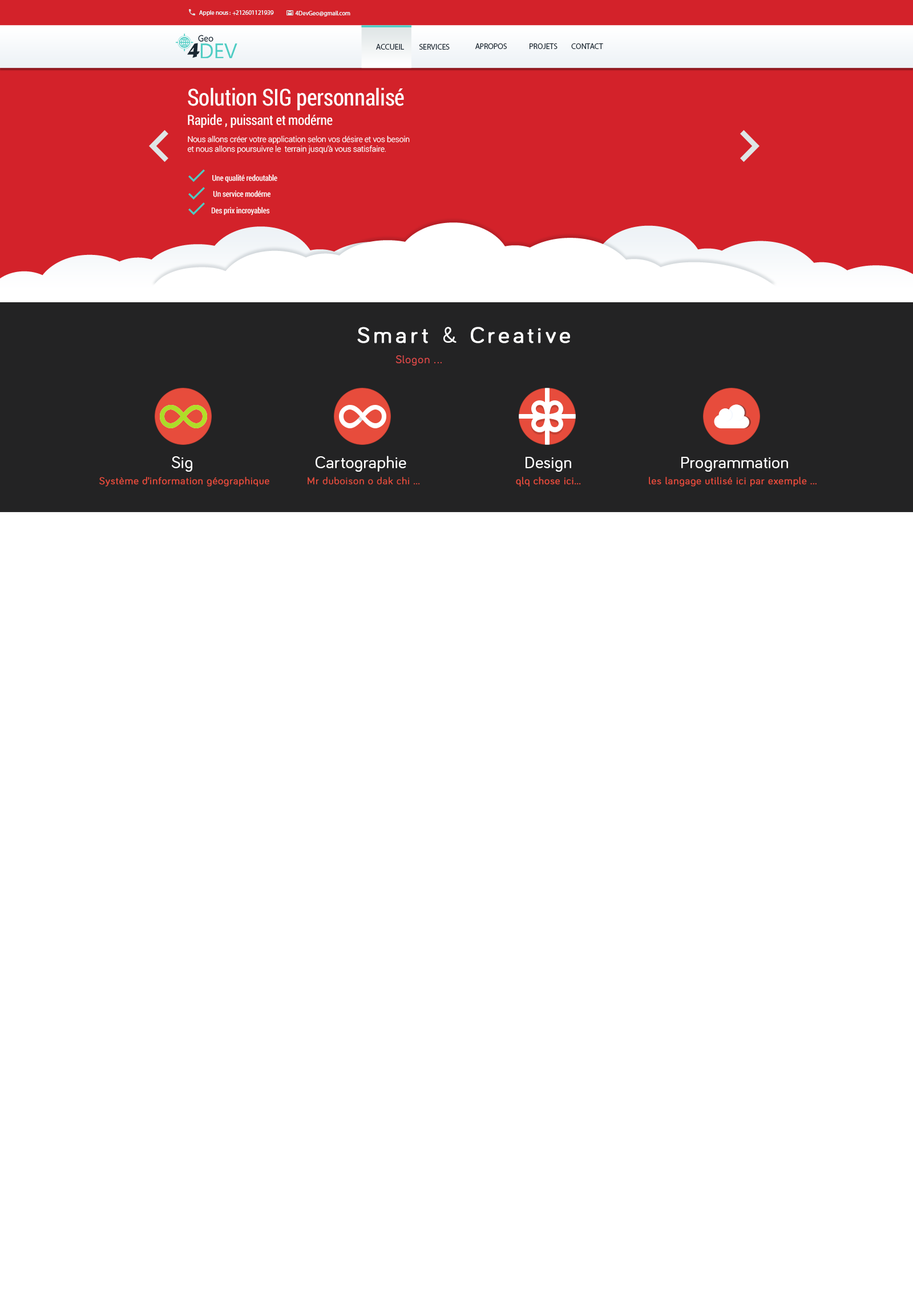
<style>
.page{position:relative;width:913px;height:1306px;background:#ffffff}
.page>*{position:absolute;margin:0}
.t1{font:6.3px "MyriadPro-Regular";letter-spacing:-0.01em;color:#edf2f6}
.t2{font:8px "MyriadPro-Regular";letter-spacing:-0.01em;color:#1a2732}
.t3{font:23.3px "RobotoCondensed-Regular";letter-spacing:-0.01em;color:#ffffff}
.t4{font:13.8px "RobotoCondensed-Regular";letter-spacing:-0.01em;color:#ffffff}
.t5{font:8px "Roboto-Light";letter-spacing:-0.01em;color:#ffffff}
.t6{font:8px "RobotoCondensed-Regular";letter-spacing:-0.01em;color:#ffffff}
.t7{font:22.8px "Bariol-Regular";letter-spacing:0.16em;color:#ffffff;font-weight:bold}
.t8{font:22.8px "Bariol-Regular";letter-spacing:0.16em;color:#ffffff}
.t9{font:11.4px "Bariol-Regular";letter-spacing:0.06em;color:#d94948}
.t10{font:17.1px "Bariol-Regular";letter-spacing:0.03em;color:#ffffff}
.t11{font:10.3px "Bariol-Regular";letter-spacing:0.04em;color:#e74c3c;font-weight:bold}
</style>
<div class="page">
<p class="t1" style="left:199px;top:10px;width:75px;height:6px">Apple nous : +212601121939</p>
<p class="t1" style="left:295px;top:11px;width:55px;height:6px">4DevGeo@gmail.com</p>
<p class="t2" style="left:376px;top:44px;width:28px;height:6px">ACCUEIL</p>
<p class="t2" style="left:419px;top:44px;width:31px;height:6px">SERVICES</p>
<p class="t2" style="left:475px;top:43px;width:32px;height:6px">APROPOS</p>
<p class="t2" style="left:529px;top:43px;width:28px;height:6px">PROJETS</p>
<p class="t2" style="left:571px;top:43px;width:32px;height:6px">CONTACT</p>
<p class="t3" style="left:188px;top:88px;width:216px;height:23px">Solution SIG personnalisé</p>
<p class="t4" style="left:188px;top:114px;width:145px;height:14px">Rapide , puissant et modérne</p>
<p class="t5" style="left:188px;top:136px;width:222px;height:18px">Nous allons créer votre application selon vos désire et vos besoin<br>et nous allons poursuivre le  terrain jusqu’à vous satisfaire.</p>
<p class="t6" style="left:212px;top:175px;width:65px;height:8px">Une qualité redoutable</p>
<p class="t6" style="left:213px;top:191px;width:58px;height:6px">Un service modérne</p>
<p class="t6" style="left:211px;top:207px;width:59px;height:8px">Des prix incroyables</p>
<p class="t7" style="left:357px;top:327px;width:213px;height:16px">Smart <span class="t8">&amp;</span> Creative</p>
<p class="t9" style="left:395px;top:355px;width:47px;height:11px">Slogon ...</p>
<p class="t10" style="left:172px;top:456px;width:20px;height:16px">Sig</p>
<p class="t10" style="left:315px;top:456px;width:91px;height:16px">Cartographie</p>
<p class="t10" style="left:525px;top:457px;width:46px;height:15px">Design</p>
<p class="t10" style="left:681px;top:457px;width:107px;height:15px">Programmation</p>
<p class="t11" style="left:99px;top:477px;width:170px;height:10px">Système d’information géographique</p>
<p class="t11" style="left:516px;top:477px;width:65px;height:10px">qlq chose ici...</p>
<p class="t11" style="left:649px;top:477px;width:167px;height:10px">les langage utilisé ici par exemple ...</p>
</div>
